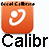
<style>
.page{position:relative;width:49px;height:49px;background:#fbfcfe}
.page>*{position:absolute;margin:0}
.t1{font:18px "ArialMT";color:#0b0b0b}
</style>
<div class="page">
<p class="t1" style="left:2px;top:34px;width:46px;height:13px">Calibr</p>
</div>
